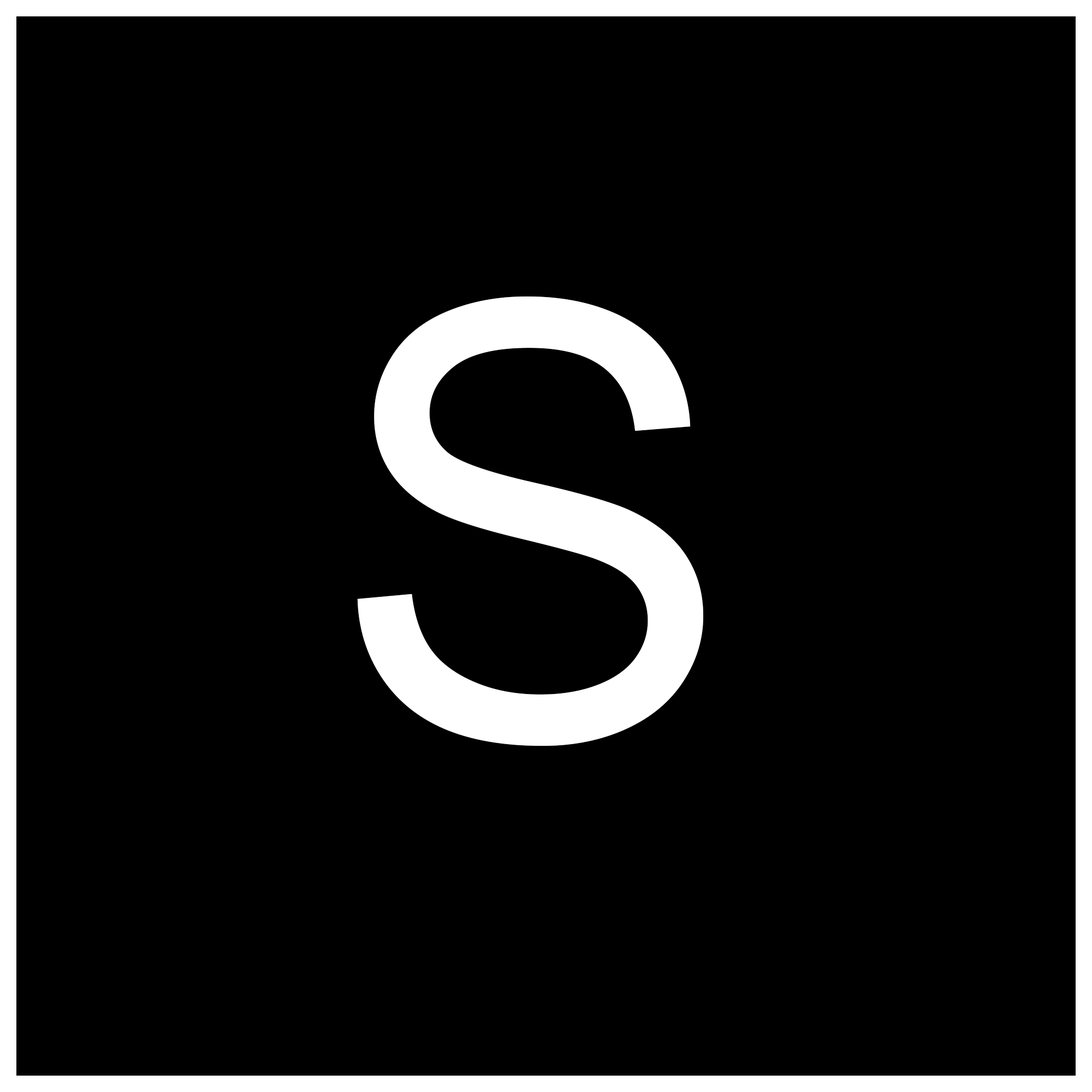
<style>
.page{position:relative;width:1092px;height:1092px;background:#000000}
.page>*{position:absolute;margin:0}
.t1{font:606.7px "ArialMT";color:#ffffff}
</style>
<div class="page">
<p class="t1" style="left:357px;top:296px;width:346px;height:450px">S</p>
</div>
